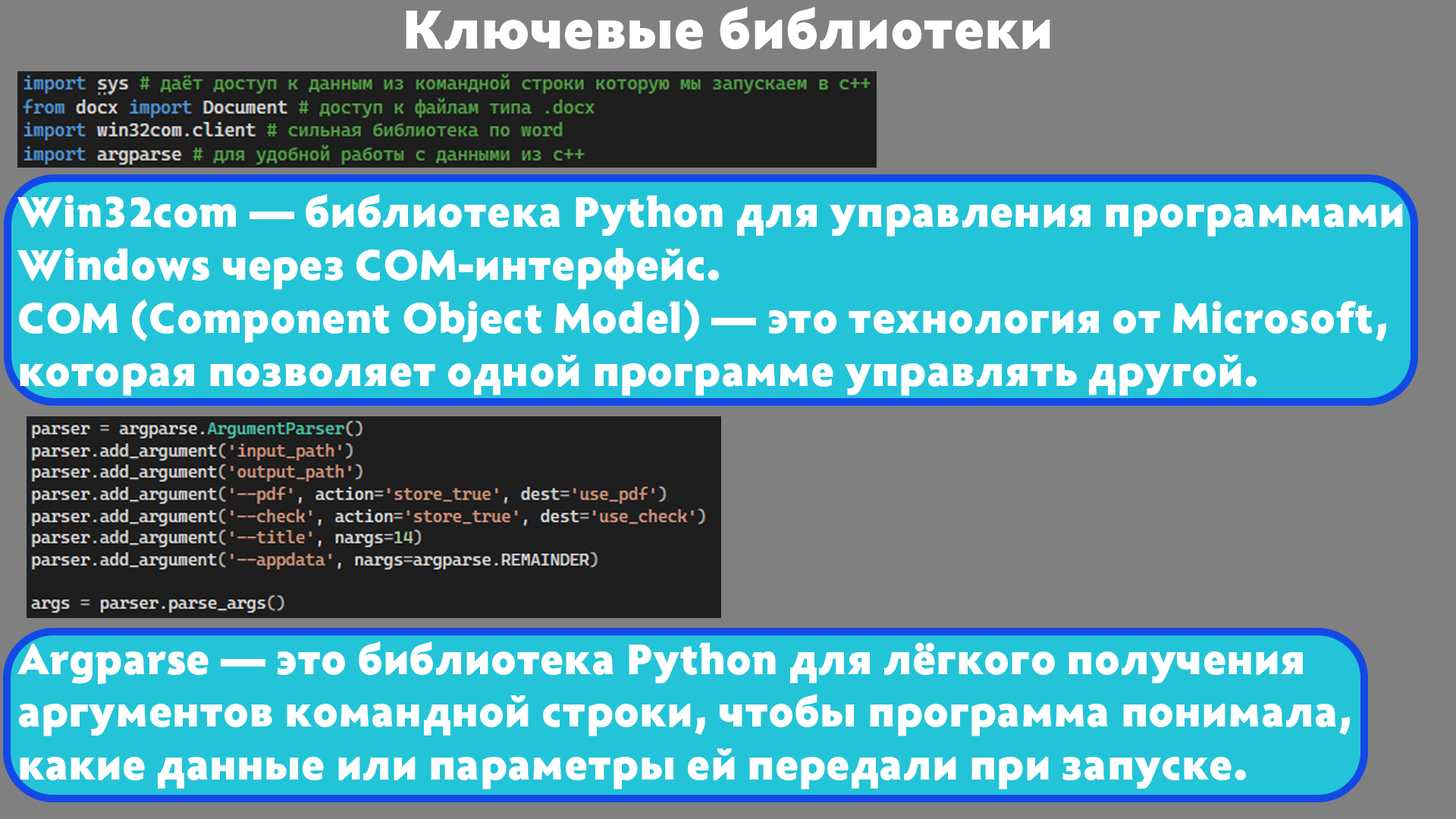
<style>
.page{position:relative;width:1456px;height:819px;background:#808080}
.page>*{position:absolute;margin:0}
.t1{font:56.9px "Radiance-Black";color:#ffffff}
.t2{font:44.2px "Radiance-Black";color:#ffffff}
</style>
<div class="page">
<p class="t1" style="left:406px;top:7px;width:644px;height:42px">Ключевые библиотеки</p>
<p class="t2" style="left:17px;top:194px;width:1386px;height:202px">Win32com — библиотека Python для управления программами <br>Windows через COM-интерфейс.<br>COM (Component Object Model) — это технология от Microsoft, <br>которая позволяет одной программе управлять другой.</p>
<p class="t2" style="left:17px;top:642px;width:1333px;height:147px">Аrgparse — это библиотека Python для лёгкого получения <br>аргументов командной строки, чтобы программа понимала, <br>какие данные или параметры ей передали при запуске.</p>
</div>
